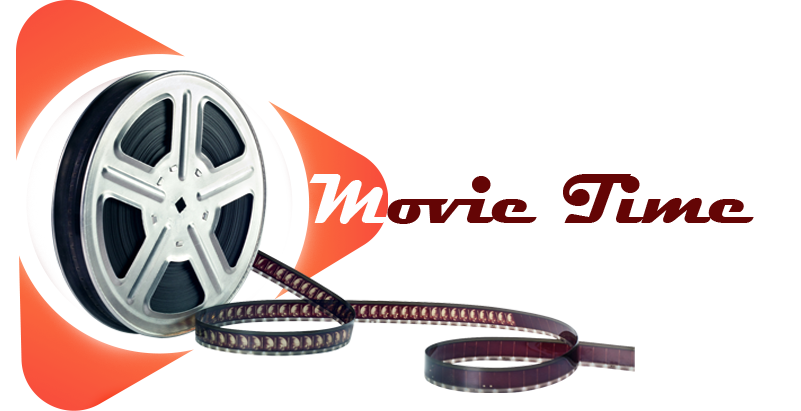
<style>
.page{position:relative;width:801px;height:411px;background:#ffffff}
.page>*{position:absolute;margin:0}
.t1{font:71px "Magneto-Bold";color:#640505}
.t2{font:71px "Magneto-Bold";color:#fefefe}
</style>
<div class="page">
<p class="t1" style="left:309px;top:174px;width:445px;height:50px"><span class="t2">M</span>ovie Time</p>
</div>
